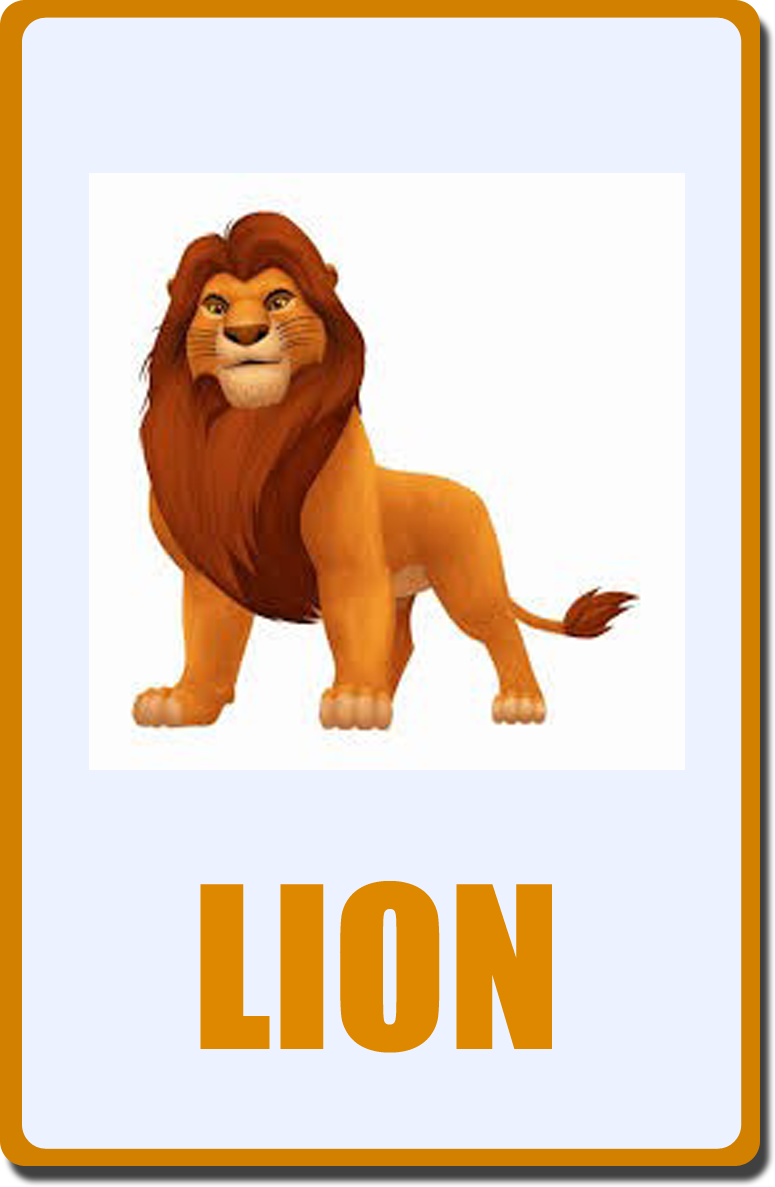
<style>
.page{position:relative;width:775px;height:1187px;background:#ecf2ff}
.page>*{position:absolute;margin:0}
.t1{font:208.3px "Impact";letter-spacing:0.005em;color:#de8800}
</style>
<div class="page">
<p class="t1" style="left:200px;top:881px;width:352px;height:172px">LION</p>
</div>
